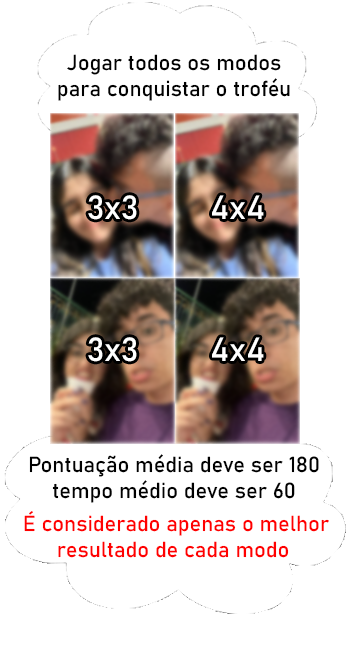
<style>
.page{position:relative;width:360px;height:658px;background:#ffffff}
.page>*{position:absolute;margin:0}
.t1{font:21.5px "Bahnschrift";color:#000000}
.t2{font:33px "Bahnschrift";color:#ffffff}
.t3{font:21.5px "Bahnschrift";color:#ff0000}
</style>
<div class="page">
<p class="t1" style="left:58px;top:54px;width:232px;height:47px;text-align:center">Jogar todos os modos<br>para conquistar o troféu</p>
<p class="t2" style="left:88px;top:195px;width:49px;height:25px">3x3</p>
<p class="t2" style="left:212px;top:195px;width:52px;height:24px">4x4</p>
<p class="t2" style="left:88px;top:337px;width:49px;height:25px">3x3</p>
<p class="t2" style="left:212px;top:337px;width:52px;height:24px">4x4</p>
<p class="t1" style="left:29px;top:454px;width:290px;height:49px;text-align:center">Pontuação média deve ser 180<br>tempo médio deve ser 60</p>
<p class="t3" style="left:24px;top:511px;width:305px;height:47px;text-align:center">É considerado apenas o melhor <br>resultado de cada modo</p>
</div>
